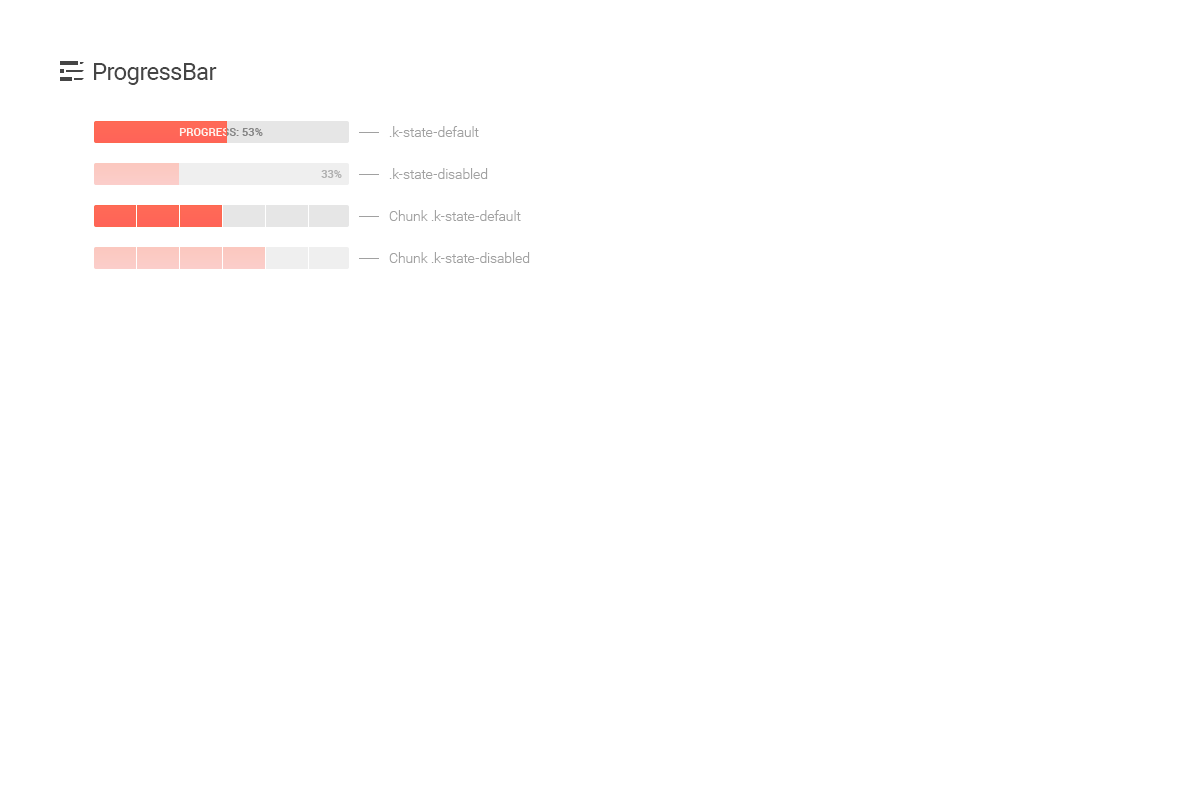
<style>
.page{position:relative;width:1200px;height:800px;background:#ffffff}
.page>*{position:absolute;margin:0}
.t1{font:24px "Roboto-Regular";letter-spacing:-0.025em;color:#454545}
.t2{font:14px/42px "Roboto-Light";color:#a1a1a1}
.t3{font:11px "Roboto-Bold";text-transform:uppercase}
.t4{font:11px "Roboto-Bold";color:#b0b0b0;text-transform:uppercase}
</style>
<div class="page">
<p class="t1" style="left:94px;top:63px;width:123px;height:22px">ProgressBar</p>
<p class="t2" style="left:389px;top:126px;width:141px;height:137px">.k-state-default<br>.k-state-disabled<br>Chunk .k-state-default<br>Chunk .k-state-disabled</p>
<p class="t3" style="left:179px;top:128px;width:84px;height:8px">Progress: 43%</p>
<p class="t4" style="left:321px;top:170px;width:21px;height:8px">33%</p>
<p class="t4" style="left:321px;top:170px;width:21px;height:8px">33%</p>
</div>
